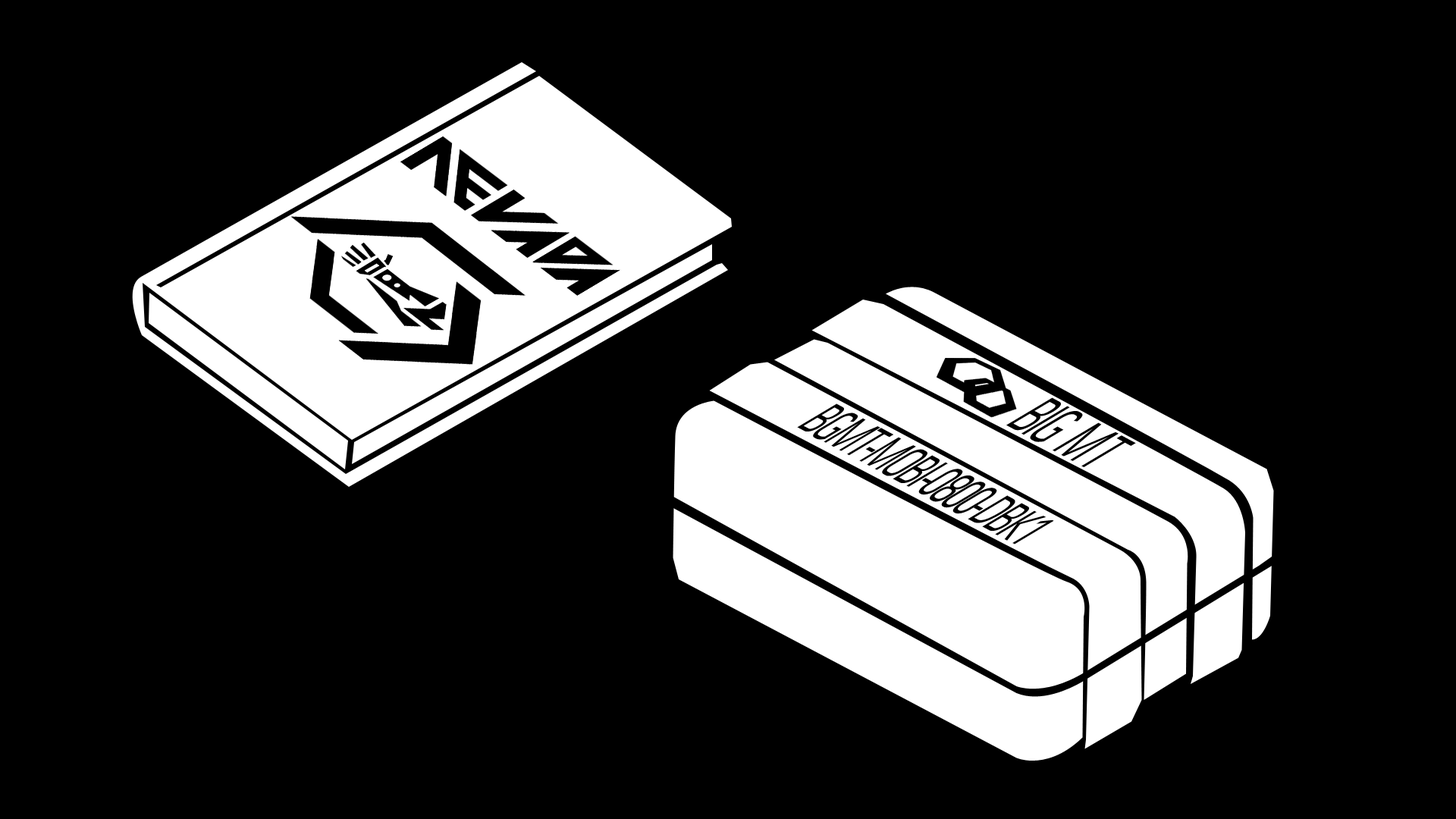
<style>
.page{position:relative;width:1456px;height:819px;background:#000000}
.page>*{position:absolute;margin:0}
.t1{font:77.4px "ConvectionRegular";letter-spacing:-0.06em;color:#000000;scale:0.44 1}
.t2{font:77.4px "ConvectionRegular";color:#000000;scale:0.44 1}
.t3{font:66px "ConvectionRegular";letter-spacing:-0.06em;color:#000000;scale:0.44 1}
</style>
<div class="page">
<p class="t1" style="left:1006px;top:397px;width:130px;height:70px;rotate:28deg">BIG <span class="t2">MT</span></p>
<p class="t3" style="left:797px;top:403px;width:257px;height:141px;rotate:28deg">BGMT-MOBI-0800-DBK1</p>
</div>
